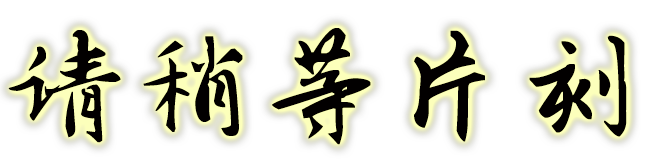
<style>
.page{position:relative;width:650px;height:165px;background:#ffffff}
.page>*{position:absolute;margin:0}
.t1{font:119.4px "SentyZHAO";color:#020000}
</style>
<div class="page">
<p class="t1" style="left:8px;top:28px;width:619px;height:117px">请稍等片刻</p>
</div>
